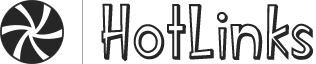
<style>
.page{position:relative;width:316px;height:64px;background:#ffffff}
.page>*{position:absolute;margin:0}
.t1{font:66.7px "FunCartoonShadowDEMO";color:#262626;font-weight:bold}
</style>
<div class="page">
<p class="t1" style="left:101px;top:3px;width:212px;height:59px">HotLinks</p>
</div>
